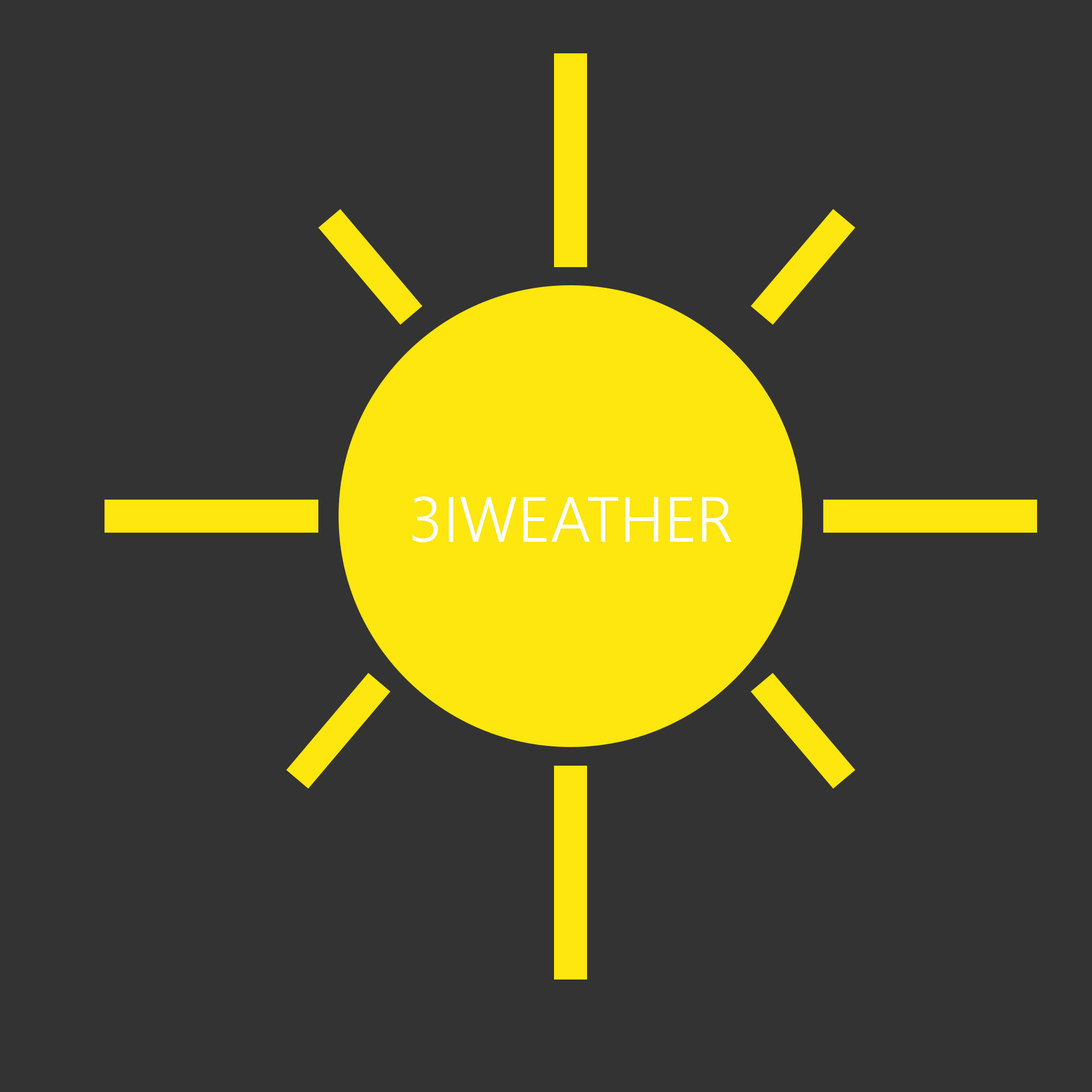
<style>
.page{position:relative;width:1092px;height:1092px;background:#333333}
.page>*{position:absolute;margin:0}
.t1{font:64.2px "SegoeUI-Semilight";color:#ffffff}
</style>
<div class="page">
<p class="t1" style="left:413px;top:496px;width:319px;height:46px">3IWEATHER</p>
</div>
